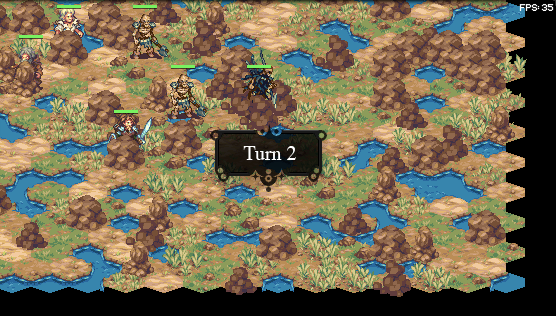
<style>
.page{position:relative;width:556px;height:316px}
.page>*{position:absolute;margin:0}
.t1{font:20px "Times-Roman";color:#ffffff}
</style>
<div class="page">
<p class="t1" style="left:243px;top:146px;width:53px;height:14px">Turn 2</p>
</div>
